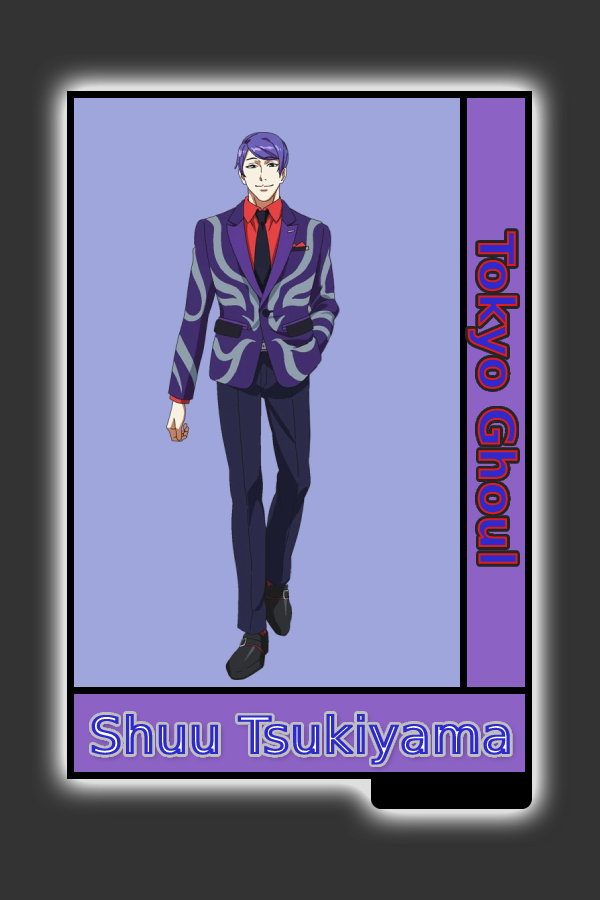
<style>
.page{position:relative;width:600px;height:900px;background:#9ea6db}
.page>*{position:absolute;margin:0}
.t1{font:48.8px "MADETOMMY-Bold"}
.t2{font:50px "CoolveticaRg-Regular";font-weight:bold}
</style>
<div class="page">
<p class="t1" style="left:467px;top:231px;width:51px;height:333px;rotate:90deg">Tokyo Ghoul</p>
<p class="t2" style="left:91px;top:714px;width:419px;height:51px">Shuu Tsukiyama</p>
</div>
